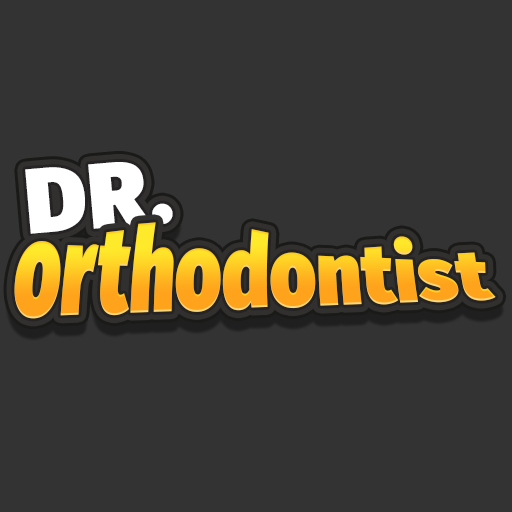
<style>
.page{position:relative;width:512px;height:512px;background:#333333}
.page>*{position:absolute;margin:0}
.t1{font:92.5px "FiraSans-Ultra";letter-spacing:0.025em;color:#ffffff}
.t2{font:62.9px "FiraSans-Ultra";letter-spacing:0.01em;scale:1.25 1}
</style>
<div class="page">
<p class="t1" style="left:25px;top:162px;width:148px;height:72px;rotate:-5deg">DR.</p>
<p class="t2" style="left:14px;top:222px;width:482px;height:97px">orthodontist</p>
</div>
